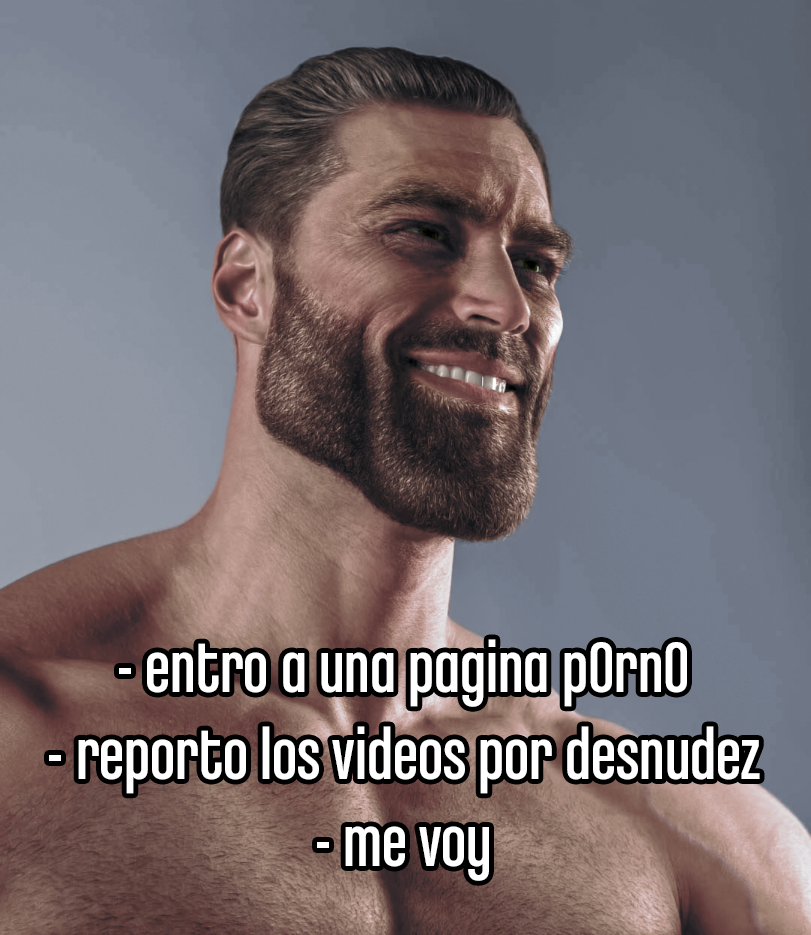
<style>
.page{position:relative;width:811px;height:935px}
.page>*{position:absolute;margin:0}
.t1{font:75.9px "ChaletComprime-CologneEighty";color:#ffffff}
</style>
<div class="page">
<p class="t1" style="left:49px;top:639px;width:711px;height:242px;text-align:center">- entro a una pagina p0rn0<br>- reporto los videos por desnudez<br>- me voy</p>
</div>
